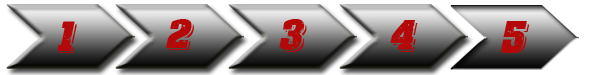
<style>
.page{position:relative;width:590px;height:75px}
.page>*{position:absolute;margin:0}
.t1{font:36px "CFRevolution-Regular";color:#b50909}
</style>
<div class="page">
<p class="t1" style="left:57px;top:21px;width:20px;height:32px">1</p>
<p class="t1" style="left:166px;top:19px;width:28px;height:31px">2</p>
<p class="t1" style="left:279px;top:19px;width:28px;height:33px">3</p>
<p class="t1" style="left:390px;top:20px;width:28px;height:32px">4</p>
<p class="t1" style="left:500px;top:21px;width:30px;height:32px">5</p>
</div>
